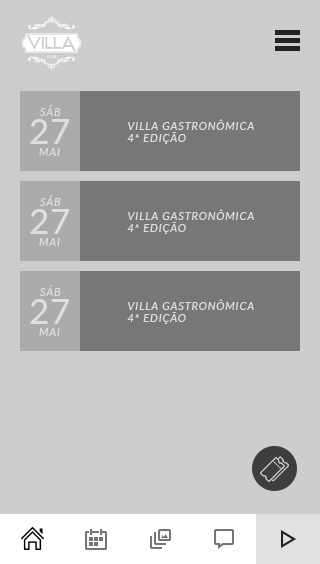
<style>
.page{position:relative;width:320px;height:564px;background:#cdcdcd}
.page>*{position:absolute;margin:0}
.t1{font:10.6px "Lato-Italic";letter-spacing:0.1em;color:#dedede;text-transform:uppercase}
.t2{font:35px "Lato-Medium";color:#dedede;text-transform:uppercase}
</style>
<div class="page">
<p class="t1" style="left:40px;top:105px;width:21px;height:11px">sáb</p>
<p class="t2" style="left:30px;top:119px;width:39px;height:25px">27</p>
<p class="t1" style="left:127px;top:119px;width:127px;height:25px">villa gastronômica<br>4ª edição</p>
<p class="t1" style="left:39px;top:148px;width:21px;height:8px">mai</p>
<p class="t1" style="left:40px;top:195px;width:21px;height:11px">sáb</p>
<p class="t2" style="left:30px;top:209px;width:39px;height:25px">27</p>
<p class="t1" style="left:127px;top:209px;width:127px;height:25px">villa gastronômica<br>4ª edição</p>
<p class="t1" style="left:39px;top:238px;width:21px;height:8px">mai</p>
<p class="t1" style="left:40px;top:285px;width:21px;height:11px">sáb</p>
<p class="t2" style="left:30px;top:299px;width:39px;height:25px">27</p>
<p class="t1" style="left:127px;top:299px;width:127px;height:25px">villa gastronômica<br>4ª edição</p>
<p class="t1" style="left:39px;top:328px;width:21px;height:8px">mai</p>
</div>
